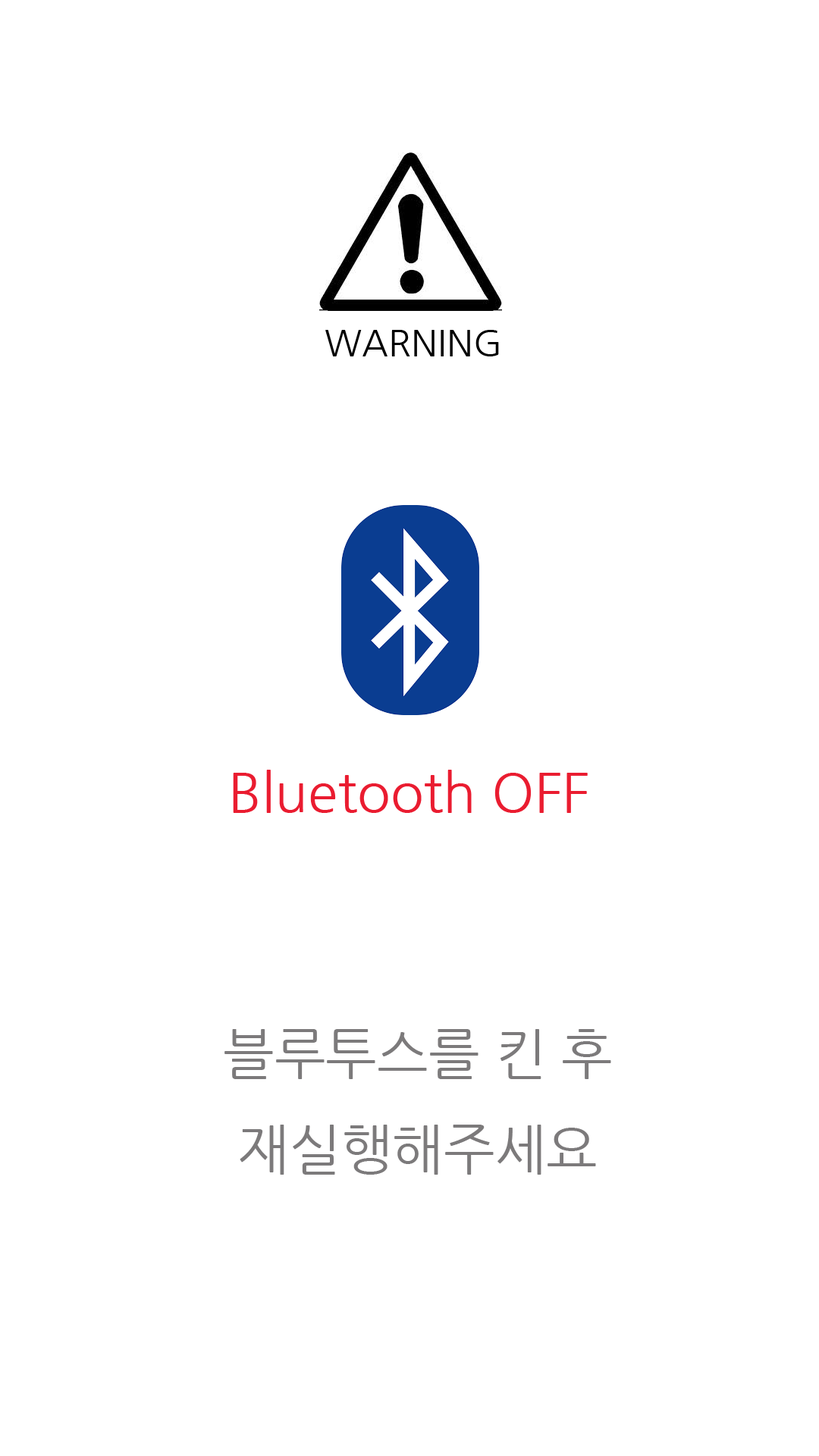
<style>
.page{position:relative;width:819px;height:1456px;background:#ffffff}
.page>*{position:absolute;margin:0}
.t1{font:36.4px "NanumGothic";color:#000000}
.t2{font:54.6px "NanumGothic";color:#ea1c30}
.t3{font:54.6px "NanumGothic";color:#7c7a7b}
</style>
<div class="page">
<p class="t1" style="left:325px;top:330px;width:174px;height:26px">WARNING</p>
<p class="t2" style="left:233px;top:770px;width:355px;height:43px">Bluetooth OFF</p>
<p class="t3" style="left:224px;top:1029px;width:387px;height:146px">블루투스를 킨 후<br> 재실행해주세요</p>
</div>
